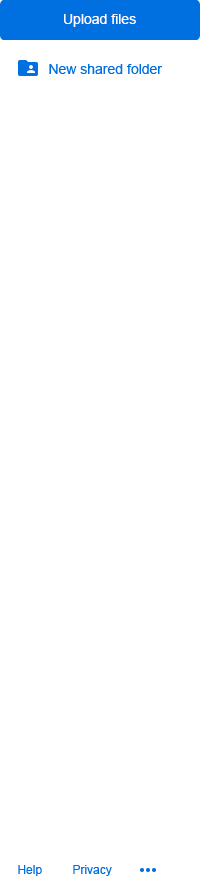
<style>
.page{position:relative;width:200px;height:876px;background:#ffffff}
.page>*{position:absolute;margin:0}
.t1{font:14px "ArialMT";color:#ffffff}
.t2{font:14px "ArialMT";color:#0070e0}
.t3{font:12px "ArialMT";color:#0070e0}
</style>
<div class="page">
<p class="t1" style="left:64px;top:14px;width:72px;height:13px">Upload files</p>
<p class="t2" style="left:49px;top:64px;width:114px;height:10px">New shared folder</p>
<p class="t3" style="left:18px;top:865px;width:24px;height:11px">Help</p>
<p class="t3" style="left:73px;top:865px;width:39px;height:11px">Privacy</p>
</div>
